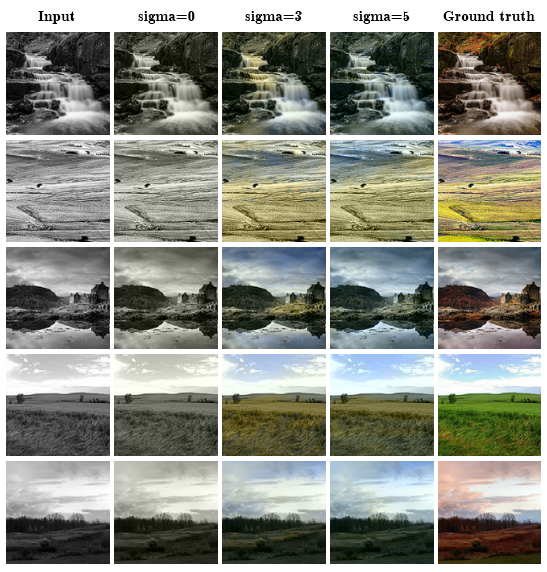
<style>
.page{position:relative;width:547px;height:572px}
.page>*{position:absolute;margin:0}
.t1{font:15.3px "Cmb10";color:#000000}
</style>
<div class="page">
<p class="t1" style="left:38px;top:11px;width:37px;height:13px">Input</p>
<p class="t1" style="left:138px;top:11px;width:57px;height:13px">sigma=0</p>
<p class="t1" style="left:245px;top:11px;width:57px;height:13px">sigma=3</p>
<p class="t1" style="left:353px;top:11px;width:57px;height:13px">sigma=5</p>
<p class="t1" style="left:443px;top:11px;width:92px;height:10px">Ground truth</p>
</div>
